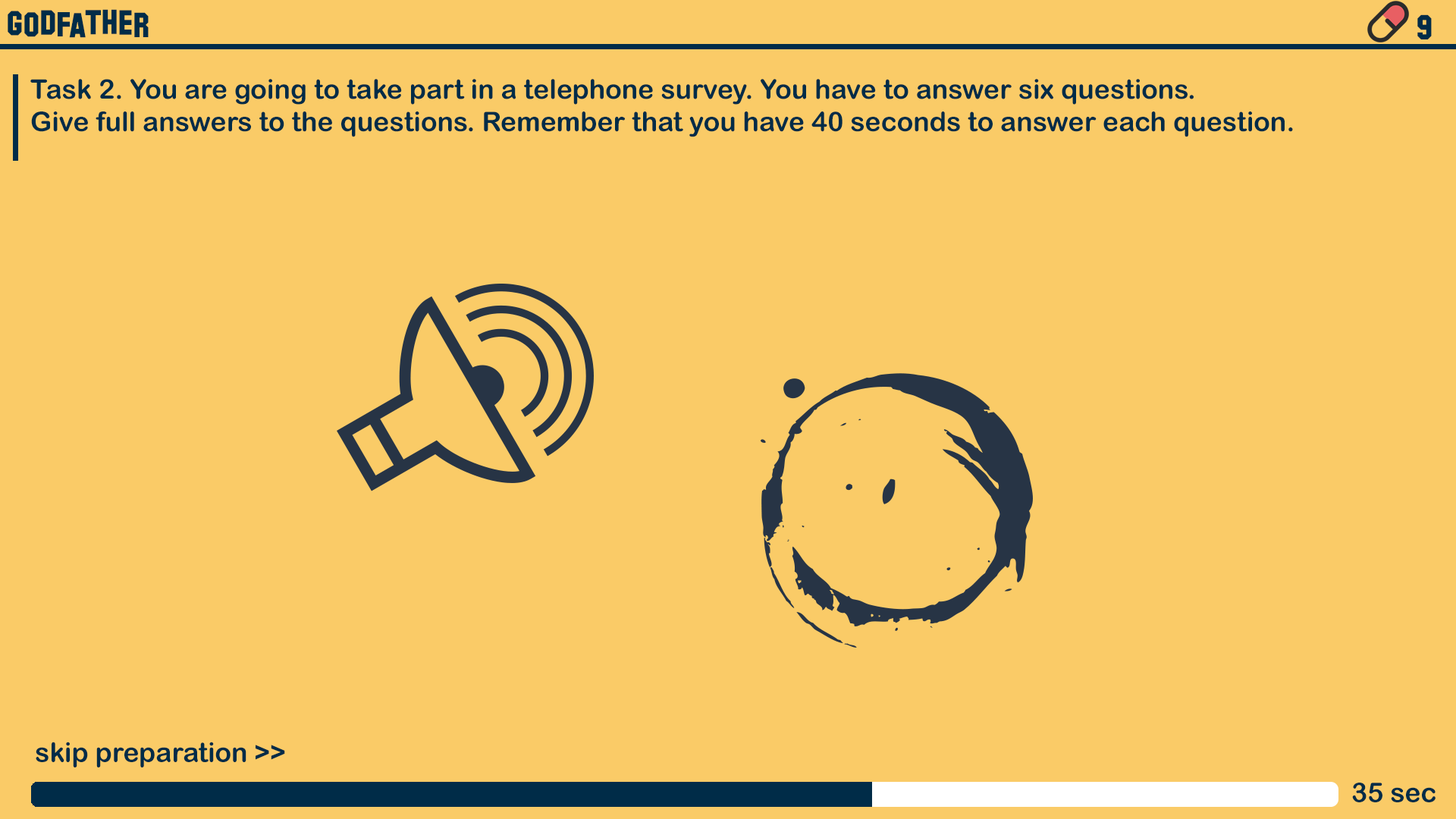
<style>
.page{position:relative;width:1456px;height:819px;background:#facb67}
.page>*{position:absolute;margin:0}
.t1{font:34.7px "HollywoodHills";color:#002c48}
.t2{font:27px "ArialRoundedMTBold";color:#002c48}
</style>
<div class="page">
<p class="t1" style="left:8px;top:9px;width:141px;height:29px">godfather</p>
<p class="t1" style="left:1417px;top:14px;width:15px;height:25px">9</p>
<p class="t2" style="left:30px;top:79px;width:1263px;height:58px;text-align:justify">Task 2. You are going to take part in a telephone survey. You have to answer six questions. <br>Give full answers to the questions. Remember that you have 40 seconds to answer each question.</p>
<p class="t2" style="left:36px;top:742px;width:249px;height:25px">skip preparation &gt;&gt;</p>
<p class="t2" style="left:1352px;top:783px;width:84px;height:19px">35 sec</p>
</div>
